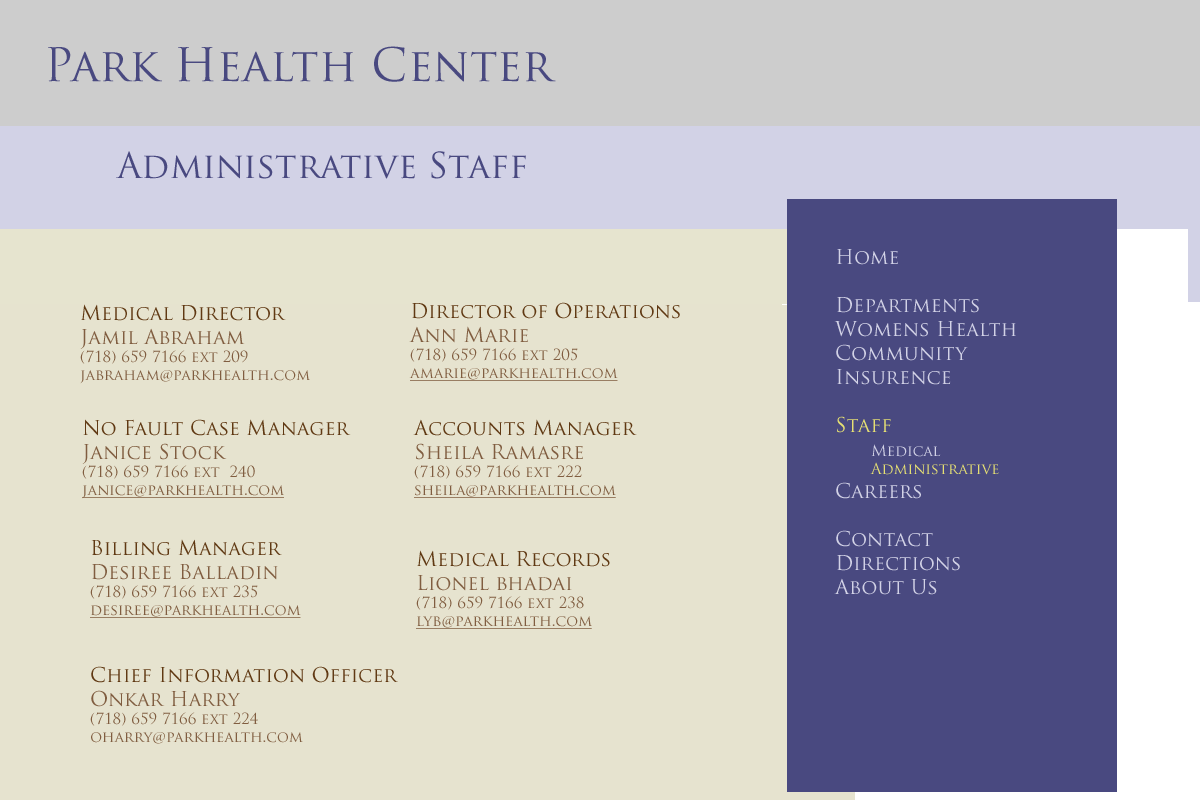
<style>
.page{position:relative;width:1200px;height:800px;background:#e6e3cf}
.page>*{position:absolute;margin:0}
.t1{font:45px "TrajanPro-Regular";color:#494980}
.t2{font:35px "TrajanPro-Regular";color:#494980}
.t3{font:20px "TrajanPro-Regular";color:#d2d2e6}
.t4{font:20px "TrajanPro-Regular";color:#e6e073}
.t5{font:15px "TrajanPro-Regular";color:#d2d2e6}
.t6{font:15px "TrajanPro-Regular";color:#e6e073}
.t7{font:15px "TrajanPro-Regular";color:#805d40}
.t8{font:20px "TrajanPro-Regular";color:#603913}
.t9{font:20px "TrajanPro-Regular";color:#805d40}
.t10{font:15px "TrajanPro-Regular";color:#805d40;text-decoration:underline}
</style>
<div class="page">
<p class="t1" style="left:48px;top:46px;width:508px;height:36px">Park Health Center</p>
<p class="t2" style="left:116px;top:151px;width:410px;height:28px">Administrative Staff</p>
<p class="t3" style="left:834px;top:249px;width:182px;height:346px">Home<br><br>Departments<br>Womens Health<br>Community<br>Insurence<br><br><span class="t4">Staff<br> </span><span class="t5">Medical<br></span><span class="t6"> Administrative<br></span>Careers<br><br>Contact<br>Directions<br>About Us</p>
<p class="t7" style="left:80px;top:304px;width:230px;height:80px"><span class="t8">Medical Director<br></span><span class="t9">Jamil Abraham<br></span>(718) 659 7166 ext 209<br>jabraham@parkhealth.com</p>
<p class="t8" style="left:409px;top:302px;width:271px;height:79px">Director of Operations<br><span class="t9">Ann Marie<br></span><span class="t7">(718) 659 7166 ext 205<br></span><span class="t10">amarie@parkhealth.com</span></p>
<p class="t7" style="left:82px;top:419px;width:269px;height:80px"><span class="t8">No Fault Case Manager<br></span><span class="t9">Janice Stock<br></span>(718) 659 7166 ext  240<br><span class="t10">janice@parkhealth.com</span></p>
<p class="t7" style="left:413px;top:419px;width:224px;height:79px"><span class="t8">Accounts Manager</span><span class="t9"><br>Sheila Ramasre<br></span>(718) 659 7166 ext 222<br><span class="t10">sheila@parkhealth.com</span></p>
<p class="t7" style="left:90px;top:539px;width:211px;height:79px"><span class="t8">Billing Manager</span><span class="t9"><br>Desiree Balladin<br></span>(718) 659 7166 ext 235<br><span class="t10">desiree@parkhealth.com</span></p>
<p class="t7" style="left:416px;top:550px;width:194px;height:79px"><span class="t8">Medical Records<br></span><span class="t9">Lionel bhadai</span><br>(718) 659 7166 ext 238<br><span class="t10">lyb@parkhealth.com</span></p>
<p class="t7" style="left:90px;top:666px;width:308px;height:78px"><span class="t8">Chief Information Officer<br></span><span class="t9">Onkar Harry</span><br>(718) 659 7166 ext 224<br>oharry@parkhealth.com</p>
</div>
